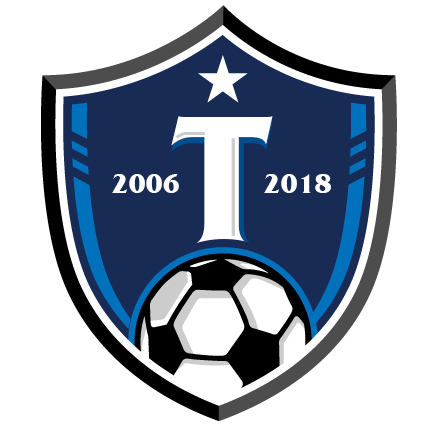
<style>
.page{position:relative;width:432px;height:432px;background:#ffffff}
.page>*{position:absolute;margin:0}
.t1{font:179.7px "FrizQuadrataC-Bold";color:#ffffff}
.t2{font:26.7px "FrizQuadrataC-Bold";color:#ffffff}
</style>
<div class="page">
<p class="t1" style="left:171px;top:122px;width:102px;height:127px">T</p>
<p class="t1" style="left:171px;top:116px;width:102px;height:127px">T</p>
<p class="t1" style="left:176px;top:117px;width:102px;height:127px">T</p>
<p class="t2" style="left:112px;top:174px;width:67px;height:19px">2006</p>
<p class="t2" style="left:264px;top:174px;width:67px;height:19px">2018</p>
</div>
